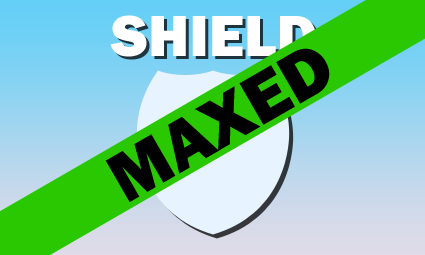
<style>
.page{position:relative;width:425px;height:255px}
.page>*{position:absolute;margin:0}
.t1{font:60px "FranklinGothic-Heavy";color:#ffffff}
.t2{font:72px "FranklinGothic-Heavy";color:#000000}
</style>
<div class="page">
<p class="t1" style="left:110px;top:15px;width:206px;height:42px">SHIELD</p>
<p class="t2" style="left:105px;top:48px;width:225px;height:154px;rotate:-30deg">MAXED</p>
</div>
